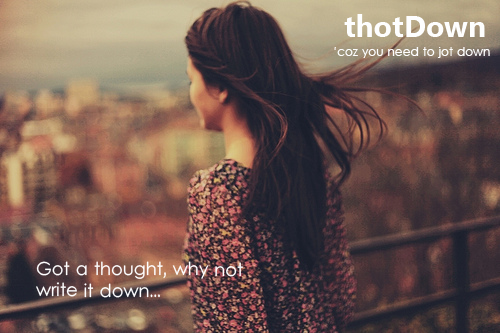
<style>
.page{position:relative;width:500px;height:333px}
.page>*{position:absolute;margin:0}
.t1{font:30px "Gadugi-Bold";color:#fefefe}
.t2{font:12px "LevenimMT";color:#fefefe}
.t3{font:18px "LevenimMT";color:#fefeff}
</style>
<div class="page">
<p class="t1" style="left:344px;top:14px;width:141px;height:23px">thotDown</p>
<p class="t2" style="left:334px;top:47px;width:156px;height:11px">‘coz you need to jot down</p>
<p class="t3" style="left:36px;top:261px;width:207px;height:37px">Got a thought, why not write it down...</p>
</div>
